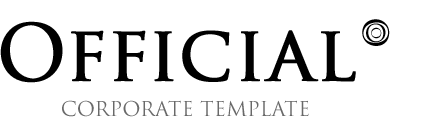
<style>
.page{position:relative;width:434px;height:140px;background:#ffffff}
.page>*{position:absolute;margin:0}
.t1{font:75.9px "TrajanPro-Regular";color:#000000;font-weight:bold}
.t2{font:34.6px "TrajanPro-Regular";color:#000000}
.t3{font:24.5px "TrajanPro-Regular";color:#000000}
.t4{font:12.6px "TrajanPro-Regular";color:#000000;scale:1.05 1}
.t5{font:20px "TrajanPro-Regular";color:#696969;text-transform:uppercase}
</style>
<div class="page">
<p class="t1" style="left:0px;top:21px;width:356px;height:62px">Official</p>
<p class="t2" style="left:362px;top:19px;width:28px;height:27px;rotate:90deg">O</p>
<p class="t3" style="left:366px;top:23px;width:20px;height:20px">O</p>
<p class="t4" style="left:371px;top:27px;width:11px;height:12px;rotate:90deg">O</p>
<p class="t5" style="left:62px;top:100px;width:247px;height:17px">Corporate Template</p>
</div>
